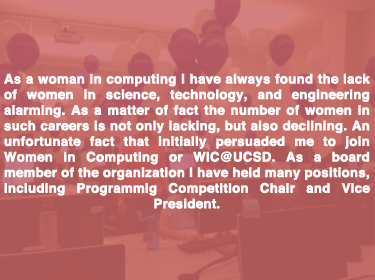
<style>
.page{position:relative;width:375px;height:280px}
.page>*{position:absolute;margin:0}
.t1{font:13px "Helvetica-Bold";color:#ffffff;font-weight:bold}
</style>
<div class="page">
<p class="t1" style="left:4px;top:73px;width:366px;height:136px;text-align:justify">As a woman in computing I have always found the lack of women in science, technology, and engineering alarming. As a matter of fact the number of women in such careers is not only lacking, but also declining. An unfortunate fact that initially persuaded me to join Women in Computing or WIC@UCSD. As a board member of the organization I have held many positions, including Programmig Competition Chair and Vice President.</p>
</div>
